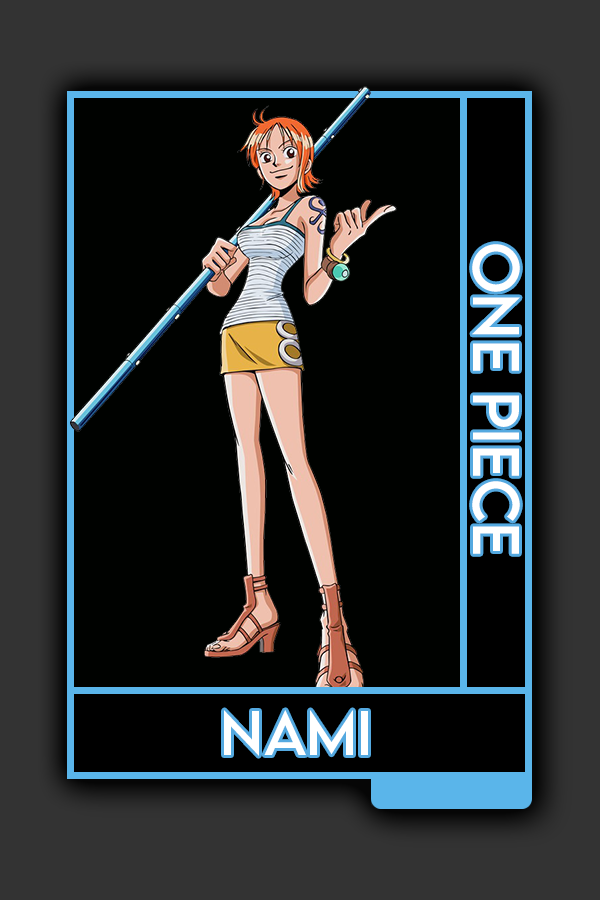
<style>
.page{position:relative;width:600px;height:900px;background:#000200}
.page>*{position:absolute;margin:0}
.t1{font:58.4px "LEMONMILK-Regular";color:#ffffff}
.t2{font:55.4px "LEMONMILK-Regular";color:#ffffff}
</style>
<div class="page">
<p class="t1" style="left:472px;top:244px;width:48px;height:310px;rotate:90deg">One Piece</p>
<p class="t2" style="left:224px;top:710px;width:144px;height:46px">Nami</p>
</div>
